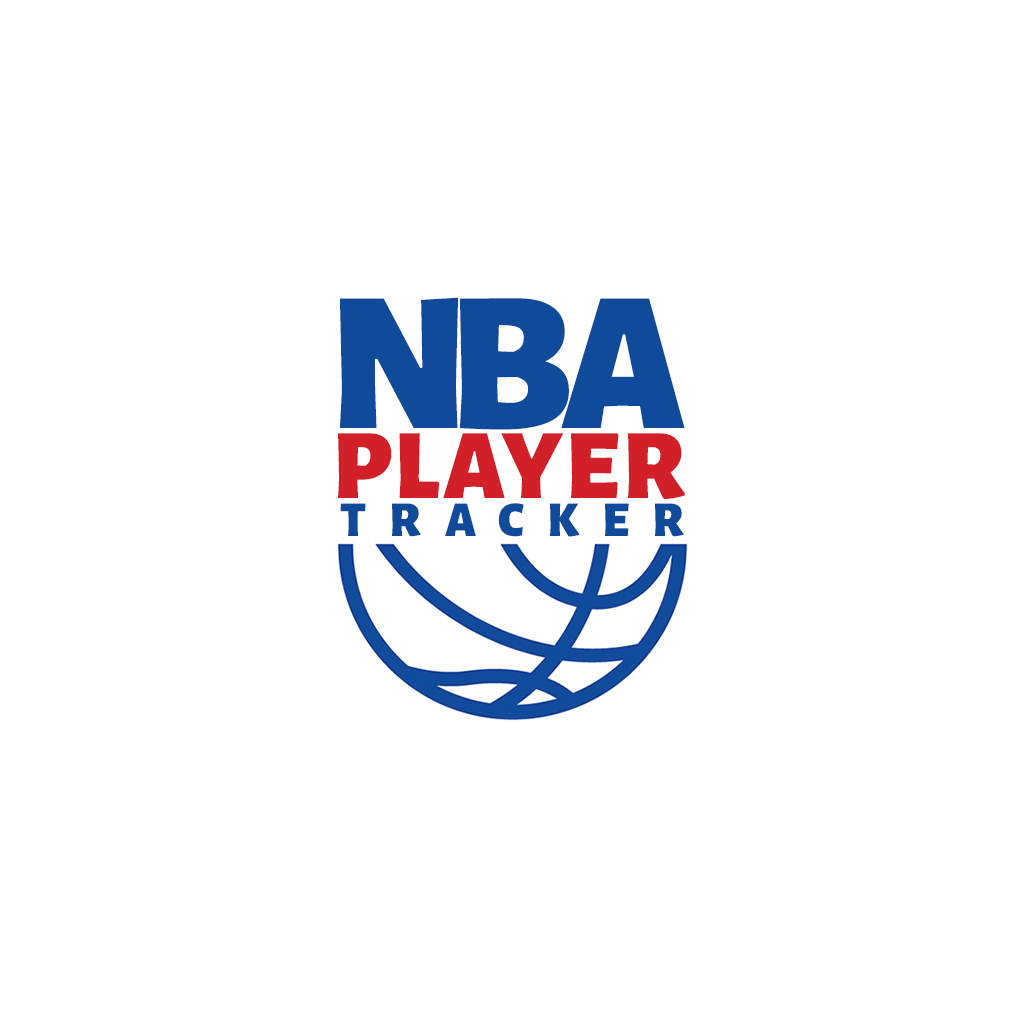
<style>
.page{position:relative;width:1024px;height:1024px;background:#ffffff}
.page>*{position:absolute;margin:0}
.t1{font:200px "AlegreyaSans-Black";letter-spacing:-0.035em;color:#104b9b}
.t2{font:100px "AlegreyaSans-Black";letter-spacing:0.045em;color:#d12027}
.t3{font:50px "AlegreyaSans-Black";letter-spacing:0.48em;color:#104b9b}
</style>
<div class="page">
<p class="t1" style="left:340px;top:297px;width:345px;height:133px">NBA</p>
<p class="t2" style="left:338px;top:433px;width:347px;height:67px">PLAYER</p>
<p class="t3" style="left:340px;top:503px;width:344px;height:34px">TRACKER</p>
</div>
